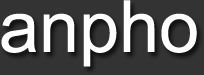
<style>
.page{position:relative;width:204px;height:75px;background:#333333}
.page>*{position:absolute;margin:0}
.t1{font:72px "ArialMT";color:#ffffff}
</style>
<div class="page">
<p class="t1" style="left:1px;top:0px;width:196px;height:67px">anpho</p>
</div>
